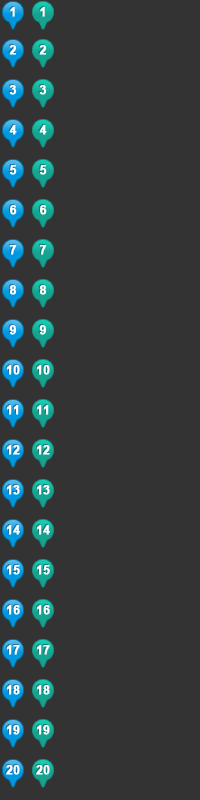
<style>
.page{position:relative;width:200px;height:800px;background:#333333}
.page>*{position:absolute;margin:0}
.t1{font:12px "Arial-BoldMT";color:#ffffff;font-weight:bold}
</style>
<div class="page">
<p class="t1" style="left:10px;top:7px;width:5px;height:10px">1</p>
<p class="t1" style="left:40px;top:7px;width:5px;height:10px">1</p>
<p class="t1" style="left:9px;top:45px;width:8px;height:10px">2</p>
<p class="t1" style="left:39px;top:45px;width:8px;height:10px">2</p>
<p class="t1" style="left:9px;top:85px;width:8px;height:10px">3</p>
<p class="t1" style="left:39px;top:85px;width:8px;height:10px">3</p>
<p class="t1" style="left:9px;top:125px;width:8px;height:10px">4</p>
<p class="t1" style="left:39px;top:125px;width:8px;height:10px">4</p>
<p class="t1" style="left:9px;top:165px;width:8px;height:10px">5</p>
<p class="t1" style="left:39px;top:165px;width:8px;height:10px">5</p>
<p class="t1" style="left:10px;top:205px;width:7px;height:10px">6</p>
<p class="t1" style="left:40px;top:205px;width:7px;height:10px">6</p>
<p class="t1" style="left:9px;top:245px;width:8px;height:10px">7</p>
<p class="t1" style="left:39px;top:245px;width:8px;height:10px">7</p>
<p class="t1" style="left:9px;top:285px;width:8px;height:10px">8</p>
<p class="t1" style="left:39px;top:285px;width:8px;height:10px">8</p>
<p class="t1" style="left:9px;top:325px;width:7px;height:10px">9</p>
<p class="t1" style="left:39px;top:325px;width:7px;height:10px">9</p>
<p class="t1" style="left:6px;top:365px;width:14px;height:10px">10</p>
<p class="t1" style="left:36px;top:365px;width:14px;height:10px">10</p>
<p class="t1" style="left:6px;top:405px;width:13px;height:10px">11</p>
<p class="t1" style="left:36px;top:405px;width:13px;height:10px">11</p>
<p class="t1" style="left:6px;top:445px;width:14px;height:10px">12</p>
<p class="t1" style="left:36px;top:445px;width:14px;height:10px">12</p>
<p class="t1" style="left:6px;top:485px;width:14px;height:10px">13</p>
<p class="t1" style="left:36px;top:485px;width:14px;height:10px">13</p>
<p class="t1" style="left:6px;top:525px;width:14px;height:10px">14</p>
<p class="t1" style="left:36px;top:525px;width:14px;height:10px">14</p>
<p class="t1" style="left:6px;top:565px;width:14px;height:10px">15</p>
<p class="t1" style="left:36px;top:565px;width:14px;height:10px">15</p>
<p class="t1" style="left:6px;top:605px;width:14px;height:10px">16</p>
<p class="t1" style="left:36px;top:605px;width:14px;height:10px">16</p>
<p class="t1" style="left:6px;top:645px;width:14px;height:10px">17</p>
<p class="t1" style="left:36px;top:645px;width:14px;height:10px">17</p>
<p class="t1" style="left:6px;top:685px;width:14px;height:10px">18</p>
<p class="t1" style="left:36px;top:685px;width:14px;height:10px">18</p>
<p class="t1" style="left:6px;top:725px;width:14px;height:10px">19</p>
<p class="t1" style="left:36px;top:725px;width:14px;height:10px">19</p>
<p class="t1" style="left:6px;top:765px;width:14px;height:10px">20</p>
<p class="t1" style="left:36px;top:765px;width:14px;height:10px">20</p>
</div>
